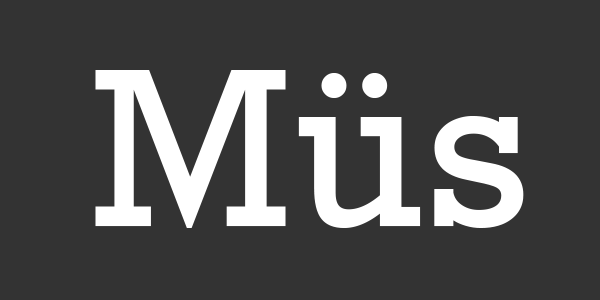
<style>
.page{position:relative;width:600px;height:300px;background:#333333}
.page>*{position:absolute;margin:0}
.t1{font:212.2px "Rockwell-Regular";color:#ffffff}
</style>
<div class="page">
<p class="t1" style="left:95px;top:70px;width:429px;height:158px">Müs</p>
</div>
